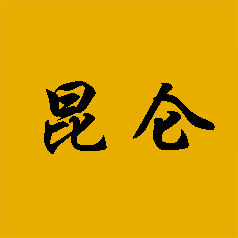
<style>
.page{position:relative;width:238px;height:238px;background:#e7ae00}
.page>*{position:absolute;margin:0}
.t1{font:96px "STXingkai";color:#000000;text-transform:uppercase}
</style>
<div class="page">
<p class="t1" style="left:44px;top:81px;width:171px;height:73px">昆仑</p>
</div>
